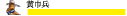
<style>
.page{position:relative;width:127px;height:16px;background:#ffffff}
.page>*{position:absolute;margin:0}
.t1{font:8px "SimSun";letter-spacing:-0.05em;color:#060906;text-transform:uppercase}
</style>
<div class="page">
<p class="t1" style="left:26px;top:0px;width:24px;height:8px">黄巾兵</p>
</div>
